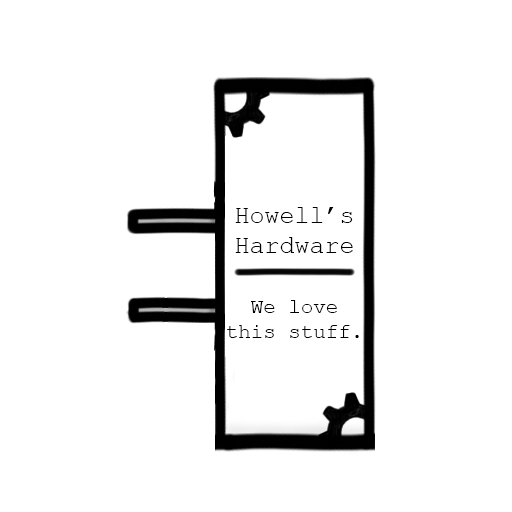
<style>
.page{position:relative;width:512px;height:512px;background:#ffffff}
.page>*{position:absolute;margin:0}
.t1{font:20.8px "CourierNewPSMT";color:#000000}
.t2{font:25px "CourierNewPSMT";color:#000000}
</style>
<div class="page">
<p class="t1" style="left:227px;top:207px;width:132px;height:131px;text-align:center"><span class="t2">Howell’s<br>Hardware<br><br></span>We love<br>this stuff.</p>
</div>
